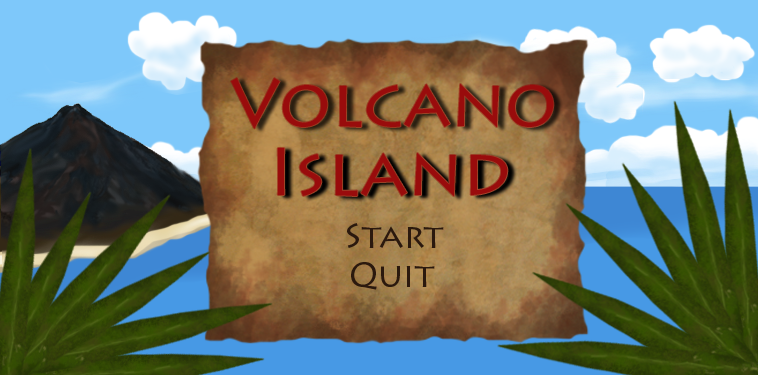
<style>
.page{position:relative;width:758px;height:375px}
.page>*{position:absolute;margin:0}
.t1{font:67.5px "LithosPro-Regular";color:#990c0c}
.t2{font:34px "LithosPro-Regular";color:#2b190e}
</style>
<div class="page">
<p class="t1" style="left:231px;top:78px;width:323px;height:51px">Volcano</p>
<p class="t1" style="left:277px;top:148px;width:231px;height:48px">Island</p>
<p class="t2" style="left:347px;top:223px;width:97px;height:25px">Start</p>
<p class="t2" style="left:351px;top:262px;width:84px;height:28px">Quit</p>
</div>
